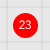
<style>
.page{position:relative;width:50px;height:50px;background:#e7e7e7}
.page>*{position:absolute;margin:0}
.t1{font:11.9px "Avenir-Light"}
</style>
<div class="page">
<p class="t1" style="left:19px;top:20px;width:12px;height:9px">23</p>
</div>
